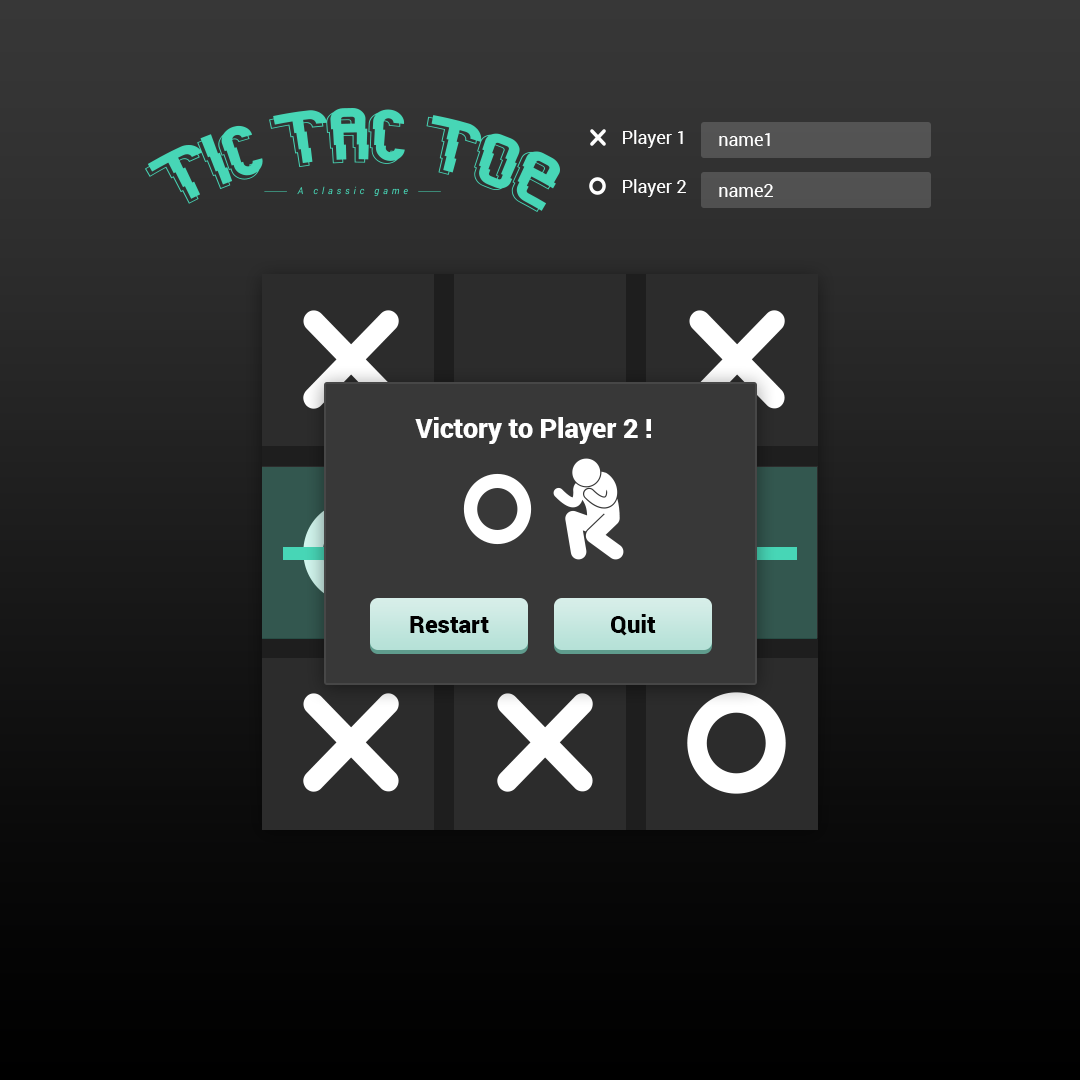
<style>
.page{position:relative;width:1080px;height:1080px}
.page>*{position:absolute;margin:0}
.t1{font:18px "Roboto-Regular";color:#ffffff}
.t2{font:26.8px "Roboto-Black";color:#ffffff}
.t3{font:24px "Roboto-Black";color:#000000}
</style>
<div class="page">
<p class="t1" style="left:623px;top:130px;width:60px;height:18px">Player 1</p>
<p class="t1" style="left:719px;top:133px;width:51px;height:13px">name1</p>
<p class="t1" style="left:623px;top:179px;width:63px;height:18px">Player 2</p>
<p class="t1" style="left:719px;top:184px;width:54px;height:13px">name2</p>
<p class="t2" style="left:415px;top:417px;width:236px;height:27px">Victory to Player 2 !</p>
<p class="t3" style="left:410px;top:616px;width:79px;height:17px">Restart</p>
<p class="t3" style="left:611px;top:614px;width:45px;height:22px">Quit</p>
</div>
